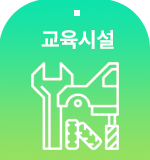
<style>
.page{position:relative;width:150px;height:160px}
.page>*{position:absolute;margin:0}
.t1{font:21.3px "Pretendard-SemiBold";color:#ffffff}
</style>
<div class="page">
<p class="t1" style="left:41px;top:30px;width:73px;height:19px">교육시설</p>
</div>
